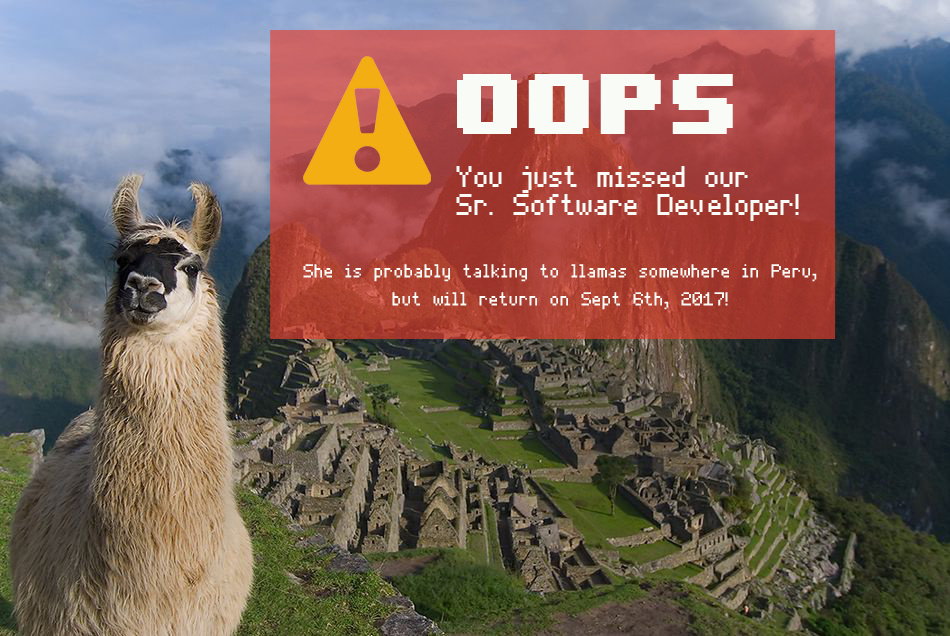
<style>
.page{position:relative;width:950px;height:636px}
.page>*{position:absolute;margin:0}
.t1{font:72px "8BITWONDERNominal";color:#f9fbf6}
.t2{font:60px/28px "ThinPixel-7";color:#f9fbf6}
.t3{font:38px/28px "ThinPixel-7";color:#f9fbf6}
.t4{font:30px/28px "SourceSansPro-Bold";color:#f9fbf6}
</style>
<div class="page">
<p class="t1" style="left:457px;top:74px;width:276px;height:60px">Oops</p>
<p class="t2" style="left:456px;top:166px;width:343px;height:55px">You just missed our <br>Sr. Software Developer!</p>
<p class="t3" style="left:303px;top:264px;width:514px;height:46px"><span class="t4"><br><br>  <br></span>She is probably talking to llamas somewhere in Peru, <br>but will return on Sept 6th, 2017!</p>
</div>
